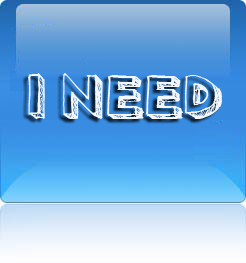
<style>
.page{position:relative;width:246px;height:263px}
.page>*{position:absolute;margin:0}
.t1{font:60px "Pointy";color:#f3f7fb}
</style>
<div class="page">
<p class="t1" style="left:28px;top:73px;width:194px;height:46px">I NEED</p>
</div>
